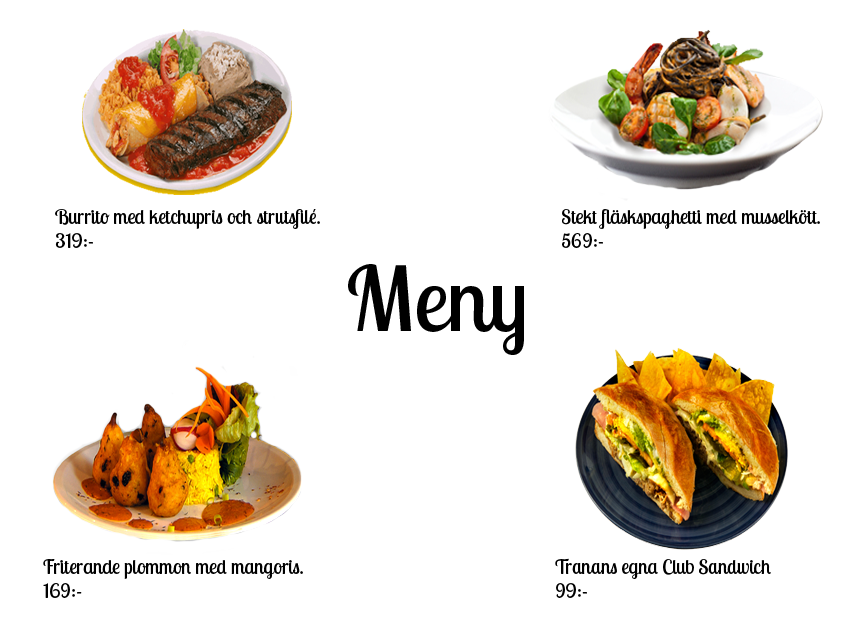
<style>
.page{position:relative;width:860px;height:620px;background:#ffffff}
.page>*{position:absolute;margin:0}
.t1{font:20px "LobsterTwo";color:#000000}
.t2{font:90px "LobsterTwo";color:#000000}
</style>
<div class="page">
<p class="t1" style="left:55px;top:209px;width:265px;height:39px">Burrito med ketchupris och strutsfilé.<br>319:-</p>
<p class="t1" style="left:562px;top:209px;width:258px;height:39px">Stekt fläskspaghetti med musselkött.<br>569:-</p>
<p class="t2" style="left:348px;top:264px;width:176px;height:91px">Meny</p>
<p class="t1" style="left:43px;top:559px;width:260px;height:39px">Friterande plommon med mangoris.<br>169:-</p>
</div>
